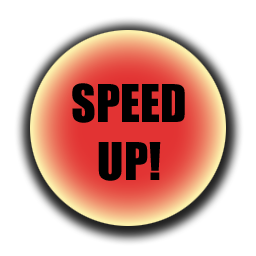
<style>
.page{position:relative;width:256px;height:256px;background:#ffffff}
.page>*{position:absolute;margin:0}
.t1{font:48px "Impact";color:#000000}
</style>
<div class="page">
<p class="t1" style="left:72px;top:83px;width:113px;height:98px;text-align:center">SPEED<br>UP!</p>
</div>
